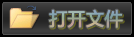
<style>
.page{position:relative;width:134px;height:37px}
.page>*{position:absolute;margin:0}
.t1{font:18px "MicrosoftYaHei";font-weight:bold}
</style>
<div class="page">
<p class="t1" style="left:48px;top:9px;width:75px;height:19px">打开文件</p>
</div>
